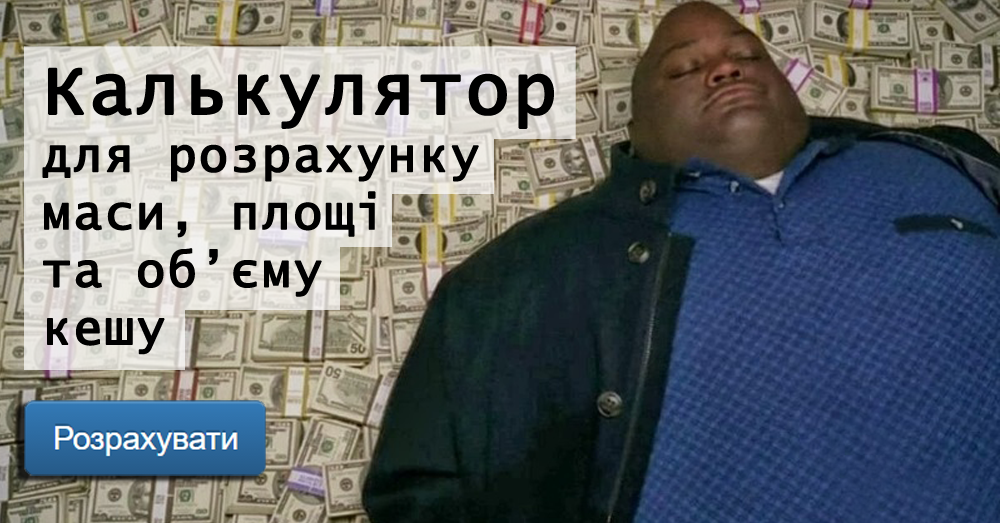
<style>
.page{position:relative;width:1000px;height:523px}
.page>*{position:absolute;margin:0}
.t1{font:48px "LucidaConsole";letter-spacing:0.025em;color:#000000;font-weight:bold}
.t2{font:72px "LucidaConsole";letter-spacing:0.025em;color:#000000;font-weight:bold}
</style>
<div class="page">
<p class="t1" style="left:42px;top:67px;width:512px;height:288px"><span class="t2">Калькулятор<br></span>для розрахунку <br>маси, площі<br>та об’єму <br>кешу</p>
</div>
